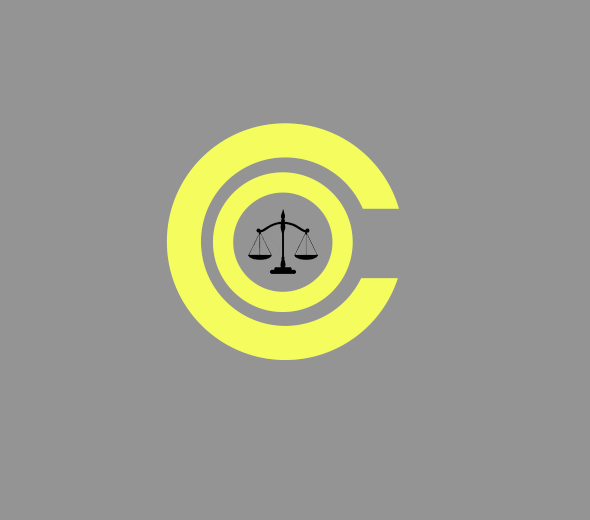
<style>
.page{position:relative;width:590px;height:520px;background:#949494}
.page>*{position:absolute;margin:0}
.t1{font:355px "AquireRegular";color:#f4fd5d}
.t2{font:210px "AquireRegular";color:#f4fd5d}
</style>
<div class="page">
<p class="t1" style="left:166px;top:123px;width:233px;height:237px">C</p>
<p class="t2" style="left:212px;top:172px;width:141px;height:140px">o</p>
</div>
